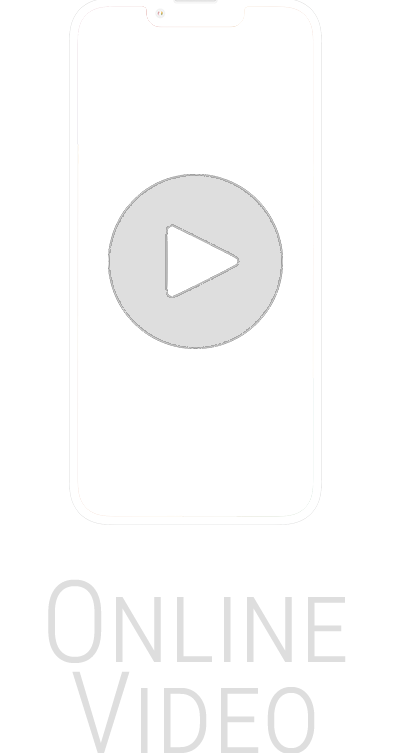
<style>
.page{position:relative;width:394px;height:753px;background:#ffffff}
.page>*{position:absolute;margin:0}
.t1{font:114.3px/91.4px "RobotoCondensed-Light";color:#dedede;font-variant:small-caps}
</style>
<div class="page">
<p class="t1" style="left:48px;top:579px;width:298px;height:175px;text-align:center">Online<br>Video</p>
</div>
